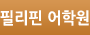
<style>
.page{position:relative;width:90px;height:35px}
.page>*{position:absolute;margin:0}
.t1{font:16px "NanumGothicExtraBold";color:#ffffff;scale:0.95 1}
</style>
<div class="page">
<p class="t1" style="left:0px;top:10px;width:89px;height:16px">필리핀 어학원</p>
</div>
